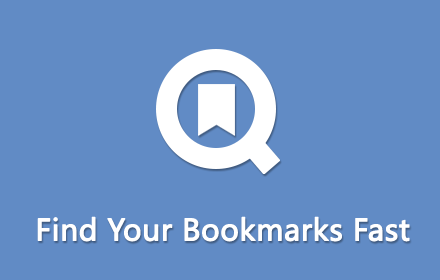
<style>
.page{position:relative;width:440px;height:280px;background:#618bc5}
.page>*{position:absolute;margin:0}
.t1{font:29px "MicrosoftYaHei";color:#ffffff;font-weight:bold}
</style>
<div class="page">
<p class="t1" style="left:37px;top:216px;width:373px;height:26px">Find Your Bookmarks Fast</p>
</div>
